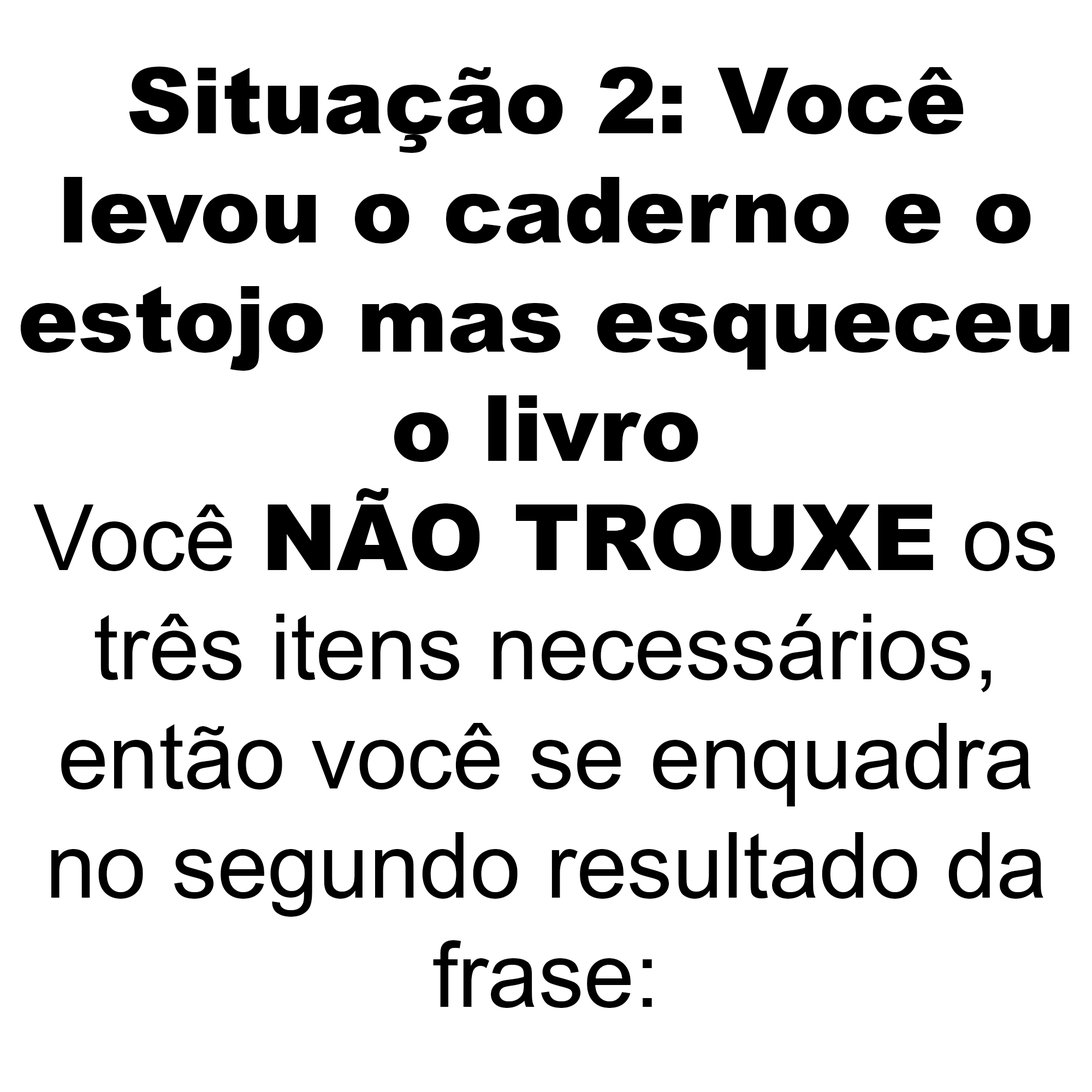
<style>
.page{position:relative;width:1092px;height:1092px;background:#ffffff}
.page>*{position:absolute;margin:0}
.t1{font:91px "ArialMT";color:#000000}
.t2{font:91px "Arial-Black";color:#000000}
</style>
<div class="page">
<p class="t1" style="left:20px;top:67px;width:1050px;height:941px;text-align:center"><span class="t2">Situação 2: Você<br>levou o caderno e o<br>estojo mas esqueceu<br>o livro<br></span>Você <span class="t2">NÃO TROUXE</span> os<br>três itens necessários,<br>então você se enquadra<br>no segundo resultado da<br>frase:</p>
</div>
